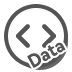
<style>
.page{position:relative;width:72px;height:72px;background:#ffffff}
.page>*{position:absolute;margin:0}
.t1{font:18.8px "MikadoMedium";color:#535453}
</style>
<div class="page">
<p class="t1" style="left:27px;top:42px;width:39px;height:26px;rotate:-30deg">Data</p>
</div>
